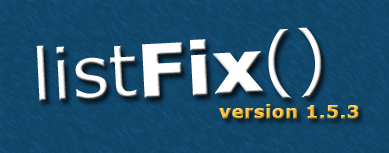
<style>
.page{position:relative;width:389px;height:153px}
.page>*{position:absolute;margin:0}
.t1{font:72px "Verdana";color:#ffffff}
.t2{font:72px "Verdana-Bold";color:#ffffff;font-weight:bold}
.t3{font:18.3px "Verdana-Bold";font-weight:bold}
</style>
<div class="page">
<p class="t1" style="left:36px;top:27px;width:286px;height:74px;rotate:-3deg">list<span class="t2">Fix</span>()</p>
<p class="t3" style="left:219px;top:104px;width:140px;height:15px">version 1.5.3</p>
</div>
